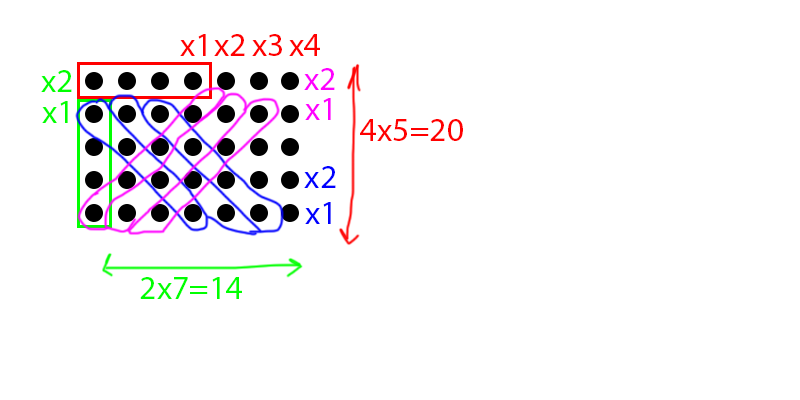
<style>
.page{position:relative;width:800px;height:400px;background:#ffffff}
.page>*{position:absolute;margin:0}
.t1{font:33.3px "MyriadPro-Regular";color:#ff0000}
.t2{font:33.3px "MyriadPro-Regular";color:#00ff00}
.t3{font:33.3px "MyriadPro-Regular";color:#ff00ff}
.t4{font:33.3px "MyriadPro-Regular";color:#0000ff}
</style>
<div class="page">
<p class="t1" style="left:180px;top:34px;width:26px;height:22px">x1</p>
<p class="t1" style="left:214px;top:34px;width:31px;height:22px">x2</p>
<p class="t1" style="left:252px;top:34px;width:30px;height:22px">x3</p>
<p class="t1" style="left:289px;top:34px;width:31px;height:22px">x4</p>
<p class="t2" style="left:41px;top:70px;width:31px;height:22px">x2</p>
<p class="t3" style="left:304px;top:68px;width:31px;height:22px">x2</p>
<p class="t2" style="left:42px;top:101px;width:26px;height:22px">x1</p>
<p class="t3" style="left:305px;top:98px;width:26px;height:22px">x1</p>
<p class="t1" style="left:360px;top:119px;width:103px;height:22px">4x5=20</p>
<p class="t4" style="left:304px;top:166px;width:32px;height:22px">x2</p>
<p class="t4" style="left:305px;top:202px;width:26px;height:22px">x1</p>
<p class="t2" style="left:140px;top:277px;width:102px;height:22px">2x7=14</p>
</div>
